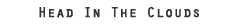
<style>
.page{position:relative;width:250px;height:25px;background:#ffffff}
.page>*{position:absolute;margin:0}
.t1{font:14px "Orator-Regular";color:#343434;font-weight:bold}
</style>
<div class="page">
<p class="t1" style="left:39px;top:6px;width:160px;height:12px">Head In The Clouds</p>
</div>
